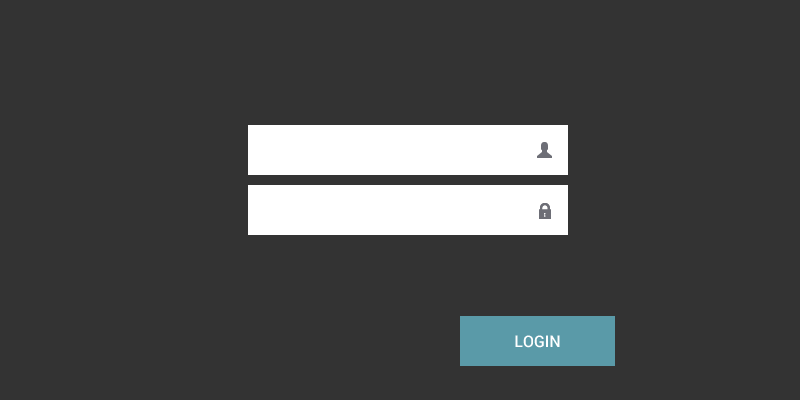
<style>
.page{position:relative;width:800px;height:400px;background:#333333}
.page>*{position:absolute;margin:0}
.t1{font:16px "Roboto-Medium";color:#ffffff}
</style>
<div class="page">
<p class="t1" style="left:515px;top:335px;width:45px;height:13px">LOGIN</p>
</div>
